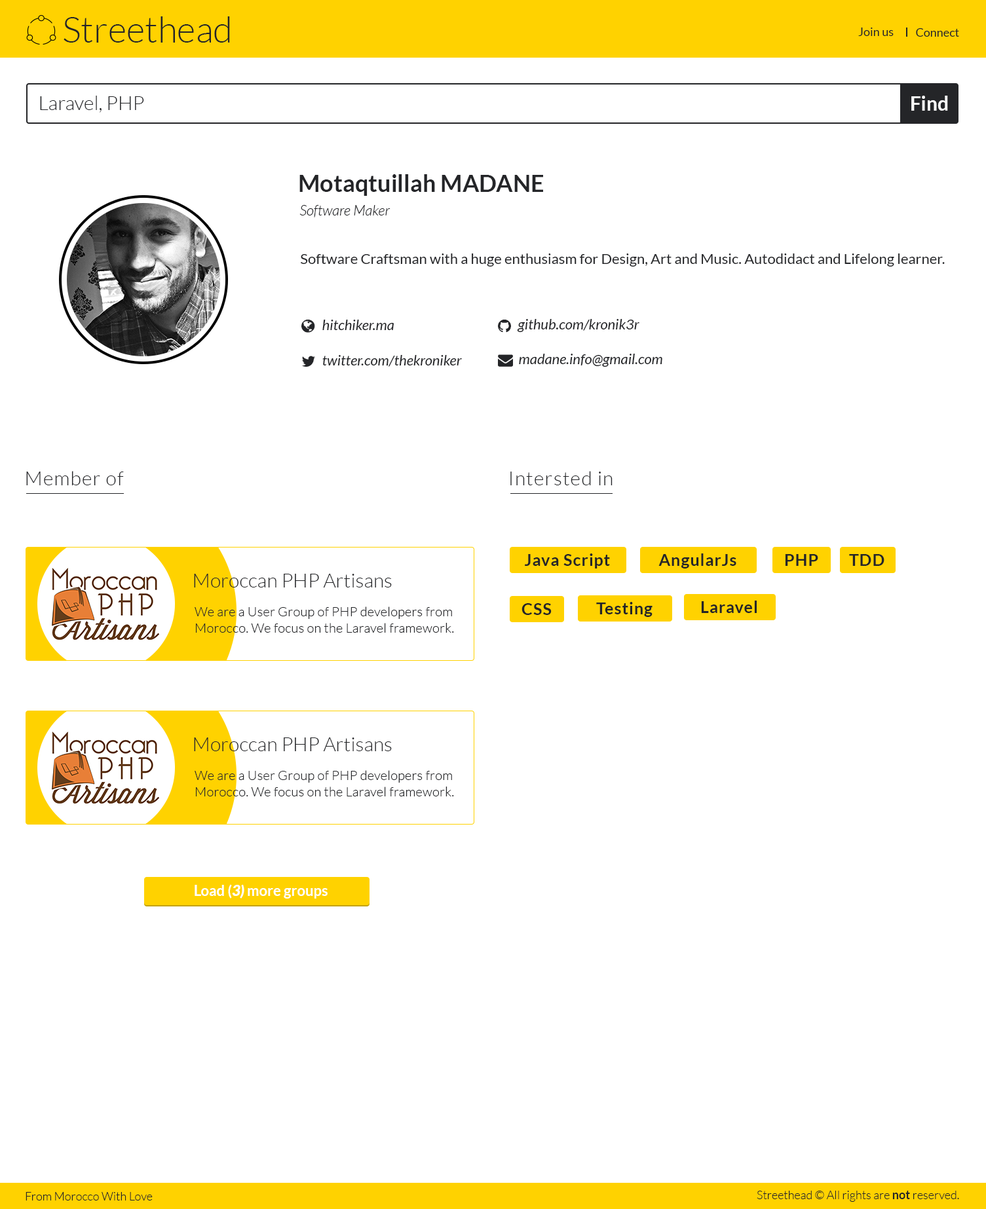
<style>
.page{position:relative;width:986px;height:1209px;background:#ffffff}
.page>*{position:absolute;margin:0}
.t1{font:36px "Lato-Light";color:#242528}
.t2{font:11.8px "Lato-Regular";color:#242528}
.t3{font:19.7px "Lato-Light";color:#242528}
.t4{font:19.7px "Lato-Bold";color:#fcfcfc}
.t5{font:23.6px "Lato-Bold";color:#242528}
.t6{font:14.4px "Lato-LightItalic";color:#242528}
.t7{font:14.4px "Lato-Regular";color:#242528}
.t8{font:14.4px "Lato-Italic";color:#242528}
.t9{font:19.7px "Lato-Light";letter-spacing:0.04em;color:#242528}
.t10{font:16.4px "Lato-Bold";letter-spacing:0.04em;color:#242528}
.t11{font:13.1px/16.4px "Lato-Light";letter-spacing:0.01em;color:#242528}
.t12{font:14.4px "Lato-Bold";color:#ffffff}
.t13{font:14.4px "Lato-BlackItalic";color:#ffffff}
.t14{font:11.8px "Lato-Light";color:#242528}
.t15{font:11.8px "Lato-Bold";color:#242528}
</style>
<div class="page">
<p class="t1" style="left:64px;top:16px;width:166px;height:27px">Streethead</p>
<p class="t2" style="left:858px;top:28px;width:36px;height:8px">Join us</p>
<p class="t2" style="left:916px;top:28px;width:43px;height:9px">Connect</p>
<p class="t3" style="left:40px;top:96px;width:104px;height:17px">Laravel, PHP</p>
<p class="t4" style="left:911px;top:96px;width:37px;height:15px">Find</p>
<p class="t5" style="left:299px;top:174px;width:244px;height:22px">Motaqtuillah MADANE</p>
<p class="t6" style="left:299px;top:205px;width:91px;height:13px">Software Maker</p>
<p class="t7" style="left:300px;top:254px;width:645px;height:13px">Software Craftsman with a huge enthusiasm for Design, Art and Music. Autodidact and Lifelong learner.</p>
<p class="t8" style="left:322px;top:320px;width:72px;height:10px">hitchiker.ma</p>
<p class="t8" style="left:517px;top:319px;width:122px;height:13px">github.com/kronik3r</p>
<p class="t8" style="left:519px;top:354px;width:143px;height:13px">madane.info@gmail.com</p>
<p class="t8" style="left:322px;top:355px;width:140px;height:12px">twitter.com/thekroniker</p>
<p class="t9" style="left:26px;top:471px;width:98px;height:14px">Member of</p>
<p class="t9" style="left:510px;top:471px;width:103px;height:14px">Intersted in</p>
<p class="t10" style="left:525px;top:554px;width:85px;height:15px">Java Script</p>
<p class="t10" style="left:658px;top:554px;width:78px;height:15px">AngularJs</p>
<p class="t10" style="left:785px;top:554px;width:33px;height:12px">PHP</p>
<p class="t10" style="left:849px;top:554px;width:35px;height:12px">TDD</p>
<p class="t3" style="left:194px;top:574px;width:198px;height:14px">Moroccan PHP Artisans</p>
<p class="t10" style="left:521px;top:603px;width:31px;height:12px">CSS</p>
<p class="t10" style="left:596px;top:602px;width:57px;height:15px">Testing</p>
<p class="t10" style="left:701px;top:601px;width:56px;height:12px">Laravel</p>
<p class="t11" style="left:195px;top:607px;width:259px;height:26px">We are a User Group of PHP developers from <br>Morocco. We focus on the Laravel framework.</p>
<p class="t3" style="left:194px;top:738px;width:198px;height:13px">Moroccan PHP Artisans</p>
<p class="t11" style="left:195px;top:770px;width:259px;height:27px">We are a User Group of PHP developers from <br>Morocco. We focus on the Laravel framework.</p>
<p class="t12" style="left:195px;top:884px;width:133px;height:15px">Load (<span class="t13">3)</span> more groups</p>
<p class="t14" style="left:26px;top:1192px;width:127px;height:9px">From Morocco With Love</p>
<p class="t14" style="left:757px;top:1191px;width:202px;height:11px">Streethead © All rights are <span class="t15">not </span>reserved.</p>
</div>
